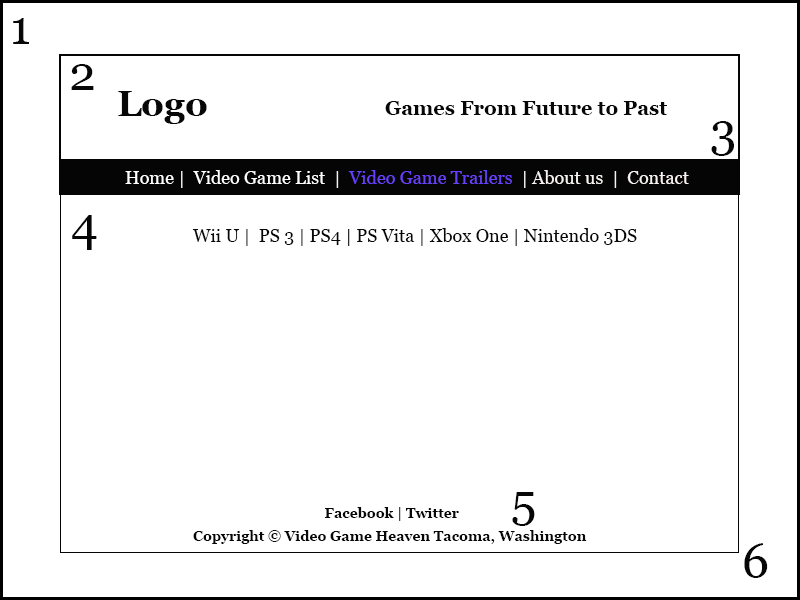
<style>
.page{position:relative;width:800px;height:600px;background:#ffffff}
.page>*{position:absolute;margin:0}
.t1{font:48px "Georgia";color:#070707}
.t2{font:36px "Georgia-Bold";color:#070707}
.t3{font:20px "Georgia-Bold";color:#070707}
.t4{font:18px "Georgia";color:#f8f2f2}
.t5{font:18px "Georgia";color:#ffffff}
.t6{font:18px "Georgia";color:#673ff8}
.t7{font:18px "Georgia";color:#070707}
.t8{font:14px "Georgia-Bold";color:#070707}
</style>
<div class="page">
<p class="t1" style="left:13px;top:18px;width:16px;height:26px">1</p>
<p class="t1" style="left:71px;top:64px;width:23px;height:26px">2</p>
<p class="t2" style="left:118px;top:91px;width:89px;height:33px">Logo</p>
<p class="t3" style="left:385px;top:101px;width:283px;height:14px">Games From Future to Past</p>
<p class="t1" style="left:711px;top:121px;width:23px;height:35px">3</p>
<p class="t4" style="left:125px;top:170px;width:564px;height:18px"><span class="t5">Home</span> |  <span class="t5">Video Game List</span>  |  <span class="t6">Video Game Trailers</span>  | About us  |  Contact</p>
<p class="t1" style="left:72px;top:215px;width:25px;height:35px">4</p>
<p class="t7" style="left:192px;top:228px;width:445px;height:18px">Wii U |  PS 3 | PS4 | PS Vita | Xbox One | Nintendo 3DS</p>
<p class="t1" style="left:512px;top:492px;width:23px;height:34px">5</p>
<p class="t8" style="left:325px;top:507px;width:134px;height:14px">Facebook | Twitter</p>
<p class="t8" style="left:193px;top:530px;width:394px;height:14px">Copyright © Video Game Heaven Tacoma, Washington</p>
<p class="t1" style="left:744px;top:543px;width:24px;height:35px">6</p>
</div>
